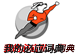
<style>
.page{position:relative;width:75px;height:55px;background:#ffffff}
.page>*{position:absolute;margin:0}
.t1{font:8.9px "HiraginoSansGB-W6";font-style:italic}
.t2{font:10px "HiraginoSansGB-W6";color:#1a1a1a;font-style:italic}
</style>
<div class="page">
<p class="t1" style="left:3px;top:43px;width:72px;height:10px">我的必应私人词典</p>
<p class="t2" style="left:4px;top:43px;width:60px;height:11px">我的必应词典</p>
</div>
